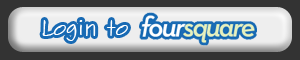
<style>
.page{position:relative;width:300px;height:60px;background:#333333}
.page>*{position:absolute;margin:0}
.t1{font:22px "SketchFlowPrint";color:#ffffff}
</style>
<div class="page">
<p class="t1" style="left:42px;top:20px;width:86px;height:21px">Login to</p>
</div>
